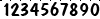
<style>
.page{position:relative;width:100px;height:19px;background:#ffffff}
.page>*{position:absolute;margin:0}
.t1{font:20.8px "DomCasualBT-Regular";letter-spacing:0.04em;color:#000000}
</style>
<div class="page">
<p class="t1" style="left:4px;top:2px;width:96px;height:14px">1234567890</p>
</div>
